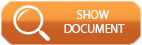
<style>
.page{position:relative;width:142px;height:45px}
.page>*{position:absolute;margin:0}
.t1{font:12px "MyriadPro-Regular";color:#ffffff}
</style>
<div class="page">
<p class="t1" style="left:64px;top:10px;width:61px;height:23px">SHOW<br>DOCUMENT</p>
</div>
